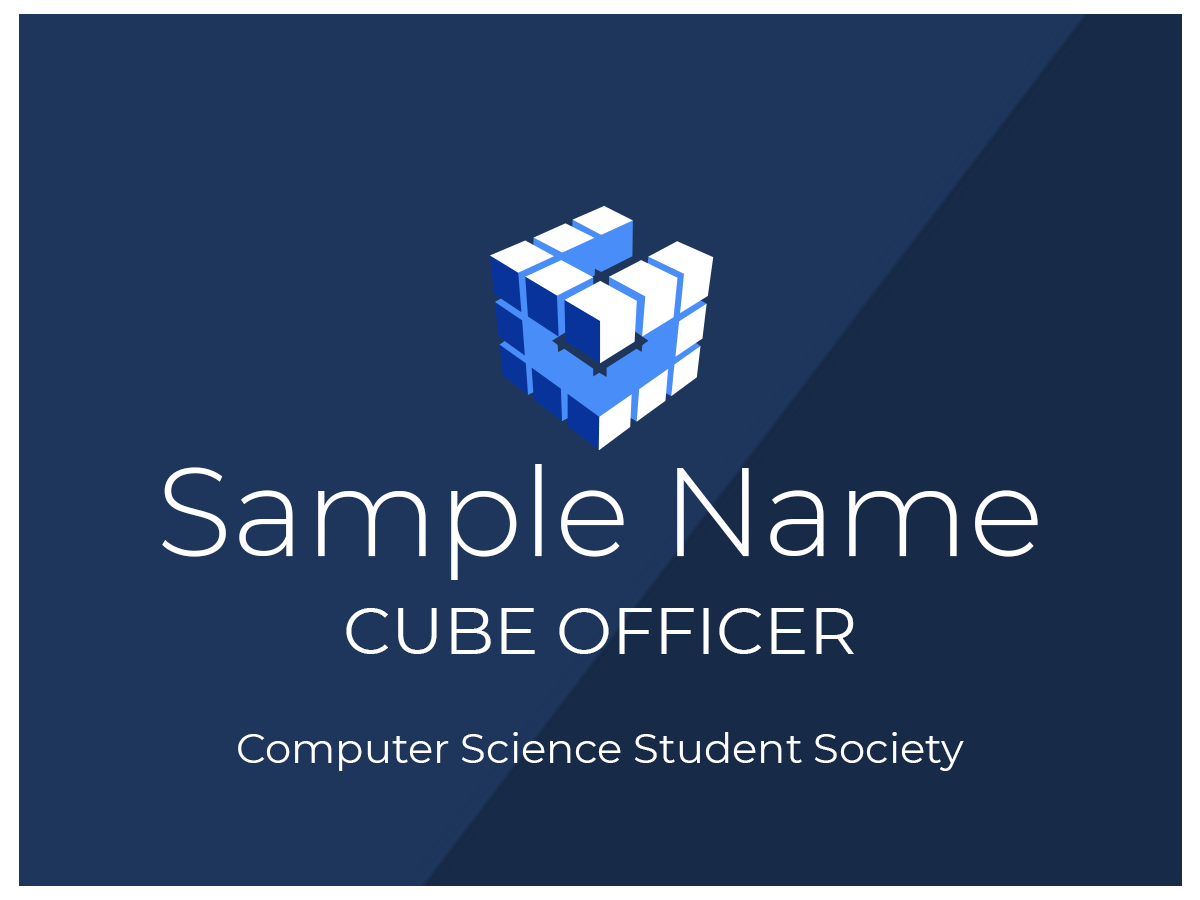
<style>
.page{position:relative;width:1200px;height:900px;background:#1e365c}
.page>*{position:absolute;margin:0}
.t1{font:125px "Montserrat-Light";color:#ffffff}
.t2{font:66.7px "Montserrat-Regular";color:#ffffff}
.t3{font:41.7px "Montserrat-Regular";color:#ffffff}
</style>
<div class="page">
<p class="t1" style="left:162px;top:464px;width:876px;height:116px">Sample Name</p>
<p class="t2" style="left:346px;top:608px;width:508px;height:46px">CUBE OFFICER</p>
<p class="t3" style="left:238px;top:732px;width:726px;height:39px">Computer Science Student Society</p>
</div>
